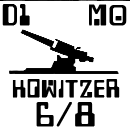
<style>
.page{position:relative;width:130px;height:130px;background:#ffffff}
.page>*{position:absolute;margin:0}
.t1{font:25px "Checkbook";letter-spacing:0.06em;color:#000000;font-weight:bold}
.t2{font:20.8px "Checkbook";letter-spacing:0.06em;color:#000000;font-weight:bold}
.t3{font:29.2px "Checkbook";letter-spacing:0.06em;color:#000000;font-weight:bold}
</style>
<div class="page">
<p class="t1" style="left:2px;top:3px;width:28px;height:22px">D1</p>
<p class="t1" style="left:89px;top:3px;width:38px;height:22px">M0</p>
<p class="t2" style="left:12px;top:78px;width:108px;height:19px">HOWITZER</p>
<p class="t3" style="left:36px;top:101px;width:59px;height:25px">6/8</p>
</div>
